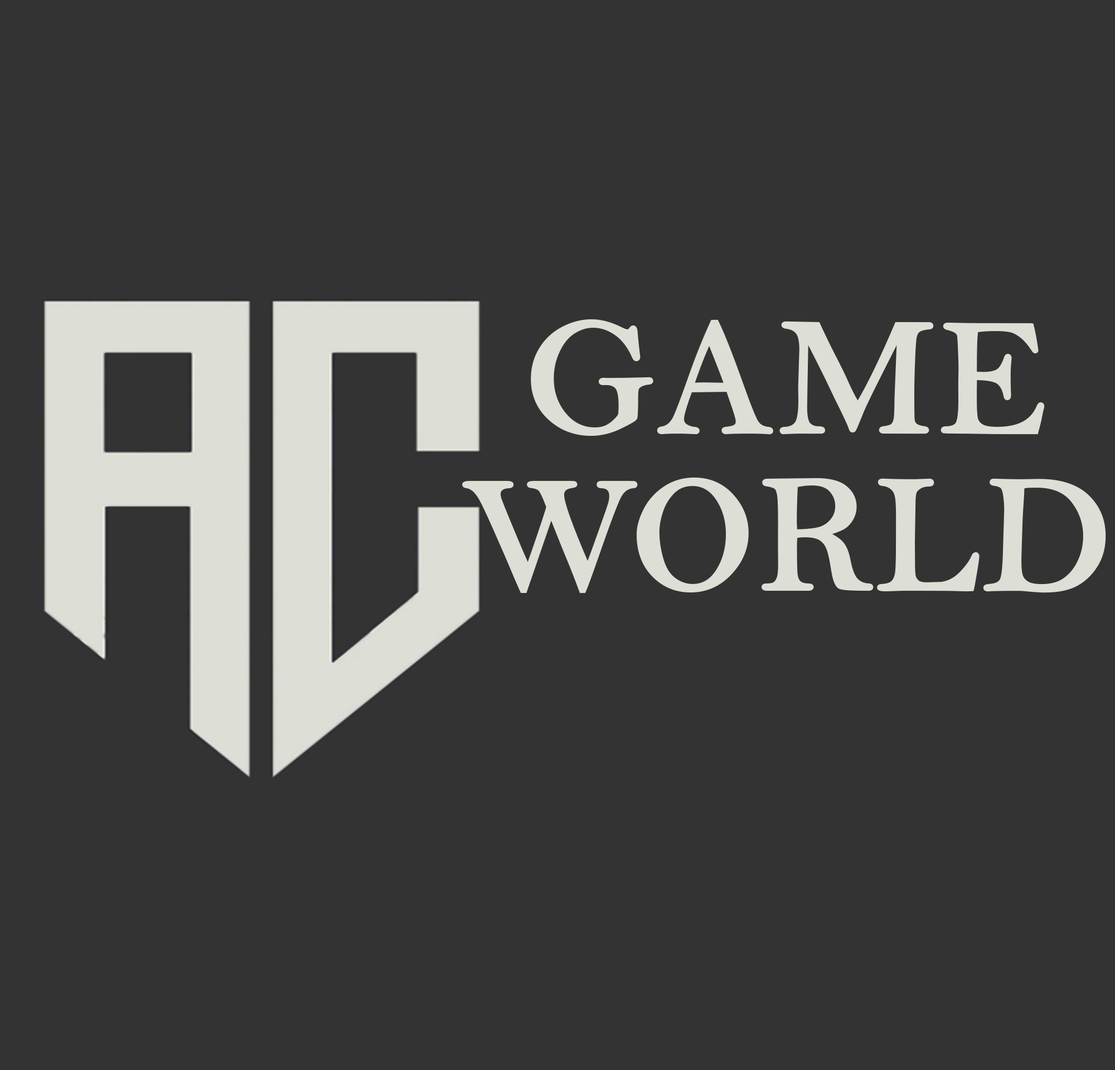
<style>
.page{position:relative;width:1115px;height:1070px;background:#333333}
.page>*{position:absolute;margin:0}
.t1{font:167.2px/157.1px "BellMT";color:#ddded5;text-transform:uppercase;font-weight:bold}
</style>
<div class="page">
<p class="t1" style="left:462px;top:319px;width:644px;height:274px;text-align:center">Game<br>World</p>
</div>
